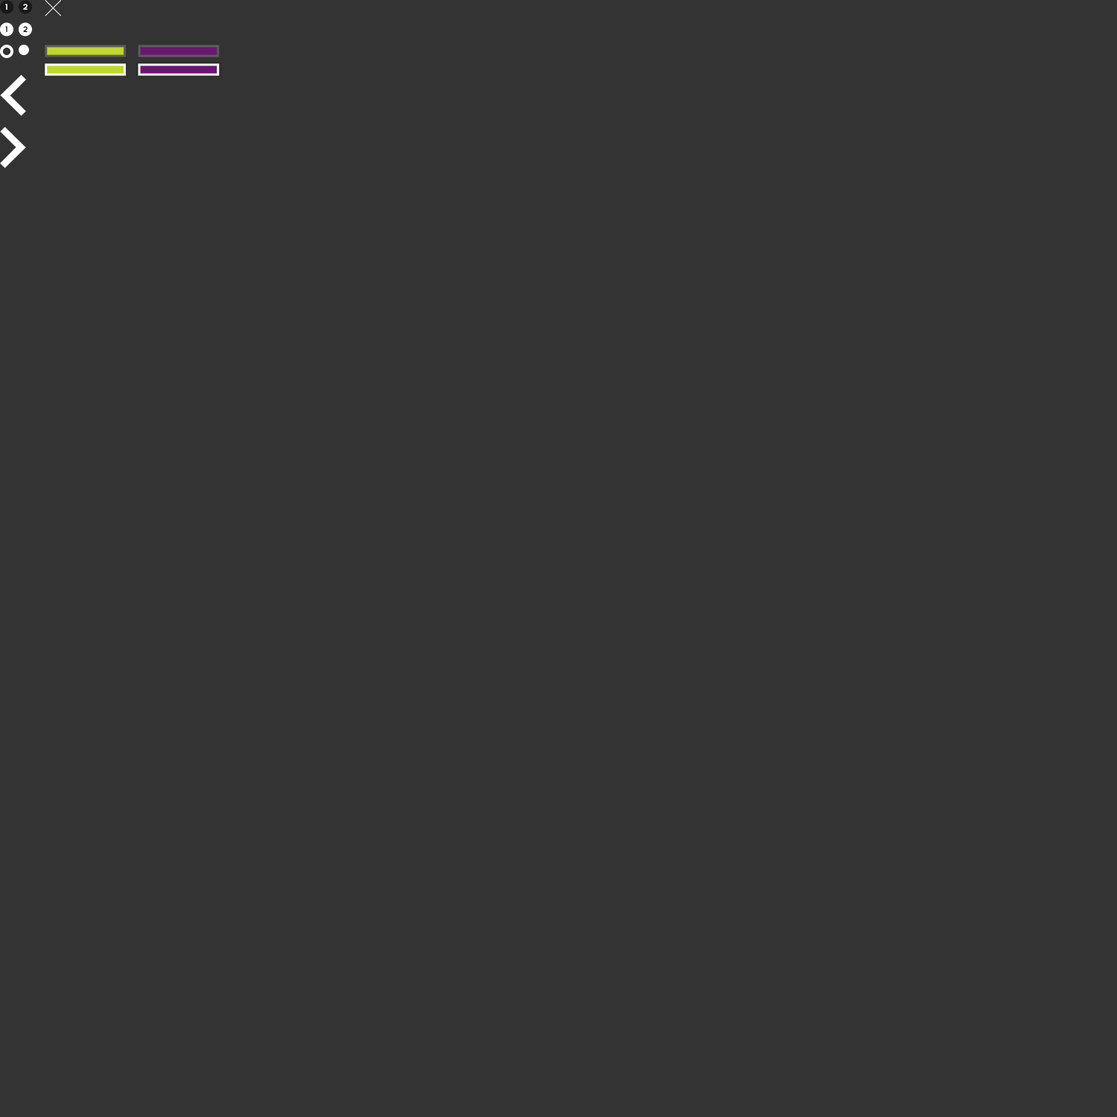
<style>
.page{position:relative;width:1117px;height:1117px;background:#333333}
.page>*{position:absolute;margin:0}
.t1{font:9px "adiNeue2013-Bold";color:#ffffff}
.t2{font:9px "adiNeue2013-Bold";color:#000000}
</style>
<div class="page">
<p class="t1" style="left:5px;top:4px;width:2px;height:6px">1</p>
<p class="t1" style="left:23px;top:4px;width:5px;height:6px">2</p>
<p class="t2" style="left:5px;top:26px;width:2px;height:6px">1</p>
<p class="t2" style="left:5px;top:26px;width:2px;height:6px">1</p>
<p class="t2" style="left:23px;top:26px;width:5px;height:6px">2</p>
</div>
